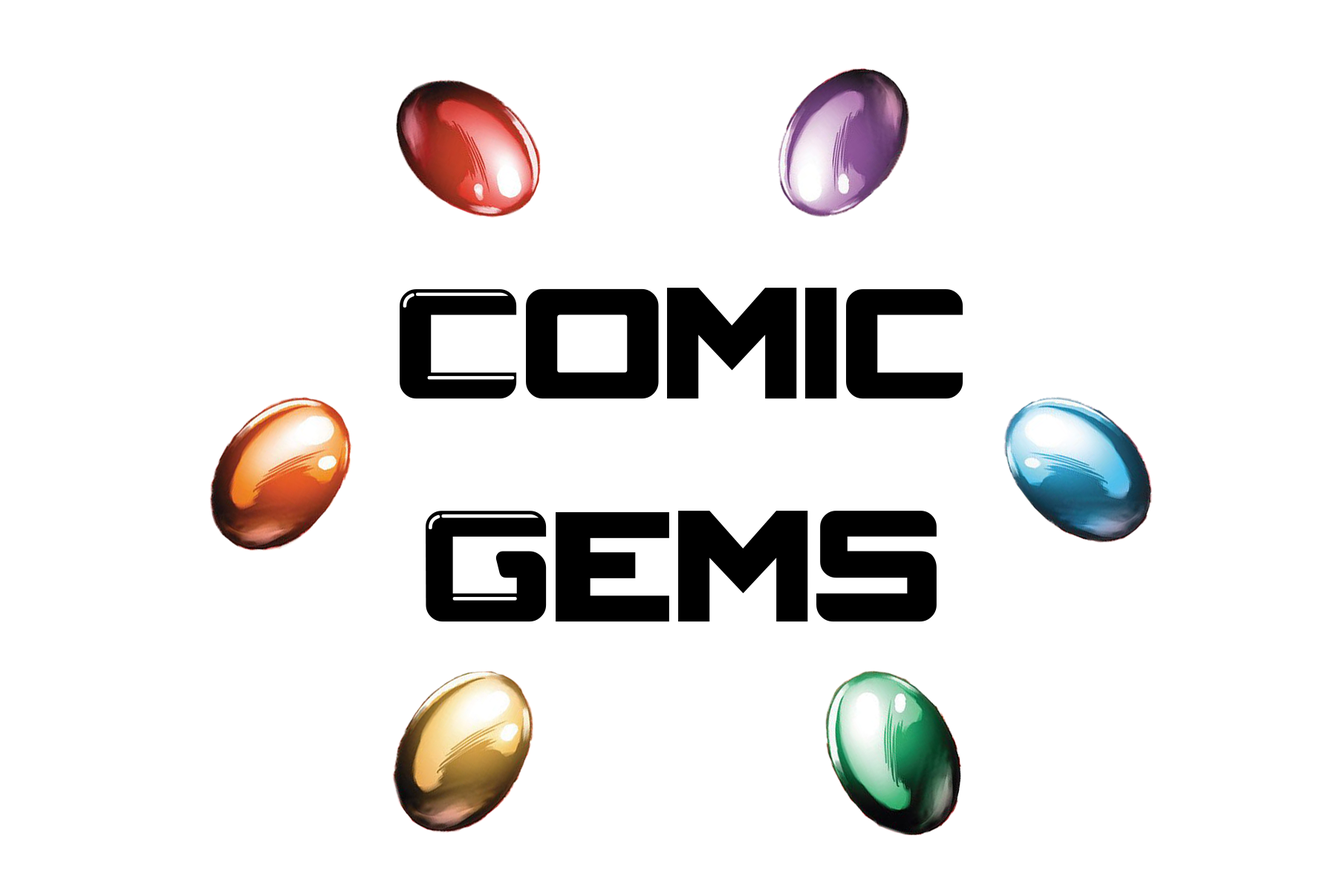
<style>
.page{position:relative;width:1337px;height:892px;background:#ffffff}
.page>*{position:absolute;margin:0}
.t1{font:185.8px "CRYSTALCORE";color:#000000}
</style>
<div class="page">
<p class="t1" style="left:400px;top:288px;width:564px;height:334px">Comic        <br>Gems</p>
</div>
